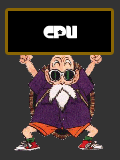
<style>
.page{position:relative;width:120px;height:160px;background:#333333}
.page>*{position:absolute;margin:0}
.t1{font:24px "Chick";color:#ffffff}
</style>
<div class="page">
<p class="t1" style="left:43px;top:25px;width:34px;height:14px">CPU</p>
</div>
